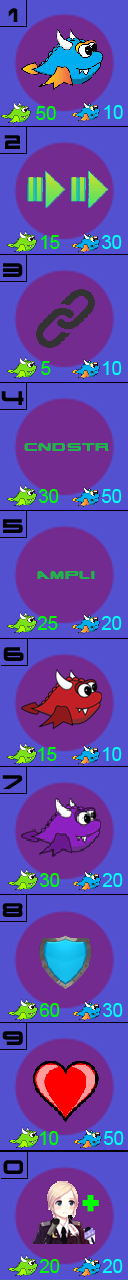
<style>
.page{position:relative;width:128px;height:1280px;background:#5451d1}
.page>*{position:absolute;margin:0}
.t1{font:18.7px "TerminatorRealNFI";color:#000000}
.t2{font:18.7px "ArialMT";color:#00ff00}
.t3{font:18.7px "ArialMT";color:#00fefe}
</style>
<div class="page">
<p class="t1" style="left:8px;top:8px;width:10px;height:14px">1</p>
<p class="t2" style="left:36px;top:106px;width:20px;height:14px">50</p>
<p class="t3" style="left:104px;top:105px;width:19px;height:14px">10</p>
<p class="t1" style="left:4px;top:135px;width:16px;height:14px">2</p>
<p class="t2" style="left:41px;top:235px;width:19px;height:14px">15</p>
<p class="t3" style="left:102px;top:235px;width:20px;height:14px">30</p>
<p class="t1" style="left:3px;top:263px;width:20px;height:14px">3</p>
<p class="t2" style="left:41px;top:361px;width:10px;height:14px">5</p>
<p class="t3" style="left:103px;top:361px;width:19px;height:14px">10</p>
<p class="t1" style="left:1px;top:391px;width:23px;height:14px">4</p>
<p class="t2" style="left:39px;top:489px;width:20px;height:14px">30</p>
<p class="t3" style="left:102px;top:489px;width:20px;height:14px">50</p>
<p class="t1" style="left:3px;top:519px;width:20px;height:14px">5</p>
<p class="t2" style="left:37px;top:616px;width:21px;height:14px">25</p>
<p class="t3" style="left:101px;top:616px;width:21px;height:14px">20</p>
<p class="t1" style="left:3px;top:647px;width:21px;height:14px">6</p>
<p class="t2" style="left:38px;top:747px;width:19px;height:14px">15</p>
<p class="t3" style="left:103px;top:747px;width:19px;height:14px">10</p>
<p class="t1" style="left:2px;top:775px;width:21px;height:14px">7</p>
<p class="t2" style="left:40px;top:873px;width:20px;height:14px">30</p>
<p class="t3" style="left:102px;top:873px;width:21px;height:14px">20</p>
<p class="t1" style="left:2px;top:903px;width:21px;height:14px">8</p>
<p class="t2" style="left:40px;top:1003px;width:20px;height:14px">60</p>
<p class="t3" style="left:103px;top:1003px;width:20px;height:14px">30</p>
<p class="t1" style="left:2px;top:1031px;width:21px;height:14px">9</p>
<p class="t2" style="left:40px;top:1131px;width:19px;height:14px">10</p>
<p class="t3" style="left:104px;top:1131px;width:20px;height:14px">50</p>
<p class="t1" style="left:3px;top:1160px;width:20px;height:14px">0</p>
<p class="t2" style="left:39px;top:1259px;width:21px;height:14px">20</p>
<p class="t3" style="left:102px;top:1259px;width:21px;height:14px">20</p>
</div>
